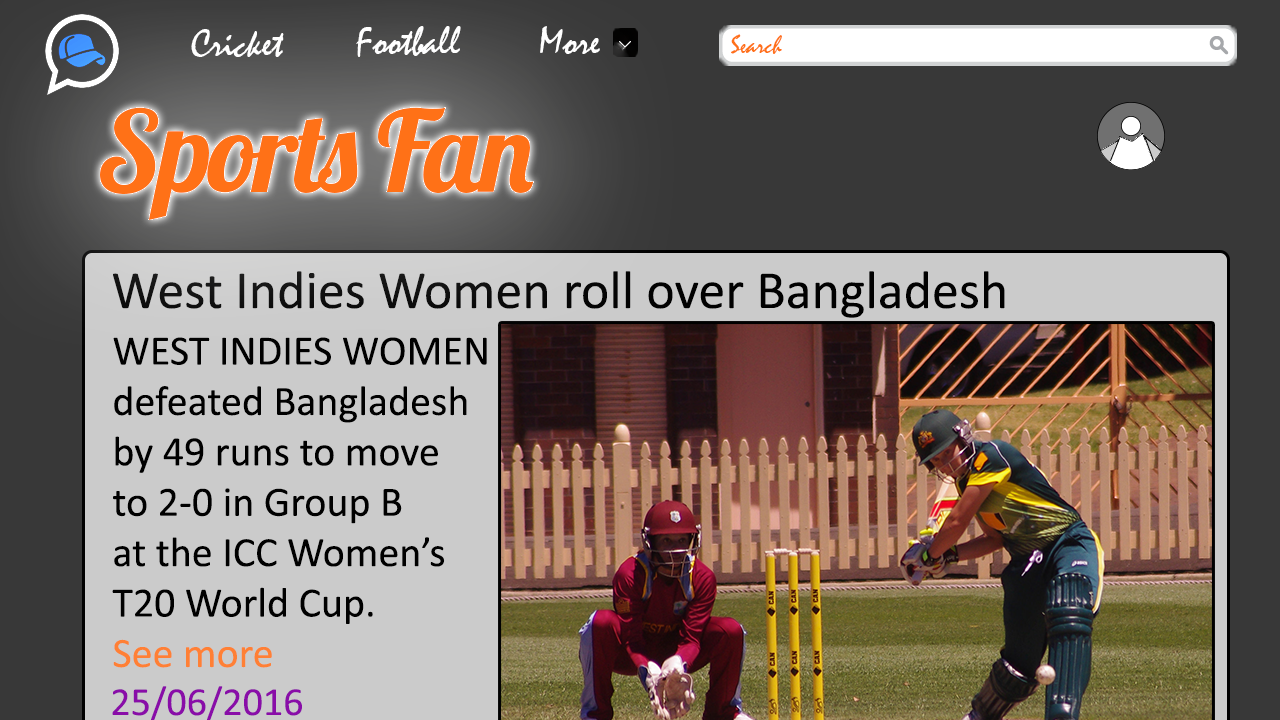
<style>
.page{position:relative;width:1280px;height:720px;background:#cbcbcb}
.page>*{position:absolute;margin:0}
.t1{font:40px "Mistral";color:#ffffff}
.t2{font:26px "Mistral";color:#ff7117}
.t3{font:54px "Calibri";color:#010101}
.t4{font:42px "Calibri";color:#000000}
.t5{font:42px "Calibri";color:#ff8035}
.t6{font:40px "Calibri";color:#890da8}
</style>
<div class="page">
<p class="t1" style="left:191px;top:29px;width:93px;height:28px">Cricket</p>
<p class="t1" style="left:356px;top:26px;width:105px;height:31px">Football</p>
<p class="t1" style="left:540px;top:26px;width:60px;height:28px">More</p>
<p class="t2" style="left:731px;top:34px;width:51px;height:20px">Search</p>
<p class="t3" style="left:113px;top:271px;width:892px;height:47px">West Indies Women roll over Bangladesh</p>
<p class="t4" style="left:112px;top:337px;width:375px;height:331px">WEST INDIES WOMEN <br>defeated Bangladesh <br>by 49 runs to move <br>to 2-0 in Group B <br>at the ICC Women’s <br>T20 World Cup. <br><span class="t5">See more</span></p>
<p class="t6" style="left:112px;top:686px;width:190px;height:35px">25/06/2016</p>
</div>
